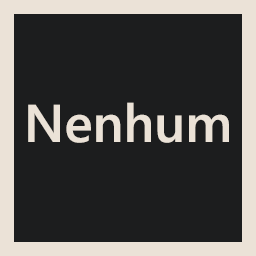
<style>
.page{position:relative;width:256px;height:256px;background:#1c1d1e}
.page>*{position:absolute;margin:0}
.t1{font:53px "YuGothicUI-Semibold";color:#ebe2d7}
</style>
<div class="page">
<p class="t1" style="left:28px;top:102px;width:201px;height:41px">Nenhum</p>
</div>
